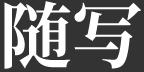
<style>
.page{position:relative;width:144px;height:72px;background:#333333}
.page>*{position:absolute;margin:0}
.t1{font:72px "SourceHanSerifTC-Bold";color:#ffffff}
</style>
<div class="page">
<p class="t1" style="left:4px;top:1px;width:137px;height:68px">随写</p>
</div>
